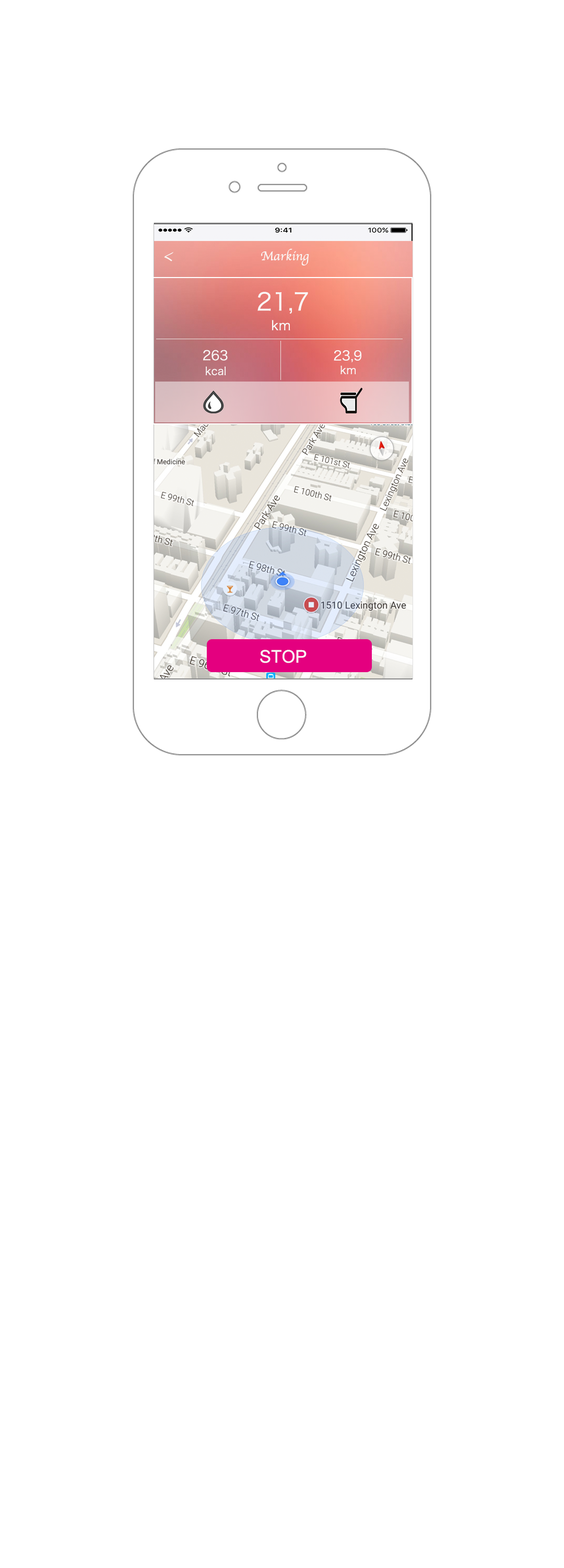
<style>
.page{position:relative;width:564px;height:1568px;background:#ffffff}
.page>*{position:absolute;margin:0}
.t1{font:17.4px "Apple-Chancery";color:#faf6f4}
.t2{font:13.1px "Apple-Chancery";color:#faf6f4}
.t3{font:24px "HiraKakuProN-W3";color:#faf8f7}
.t4{font:13.1px "HiraKakuProN-W3";color:#faf8f7}
.t5{font:10.9px "HiraKakuProN-W3";color:#faf8f7}
.t6{font:17.4px "ArialMT";color:#faf8f7}
</style>
<div class="page">
<p class="t1" style="left:164px;top:252px;width:10px;height:9px">&lt;</p>
<p class="t2" style="left:261px;top:249px;width:48px;height:17px">Marking</p>
<p class="t3" style="left:258px;top:292px;width:50px;height:22px">21,7</p>
<p class="t4" style="left:272px;top:320px;width:19px;height:10px">km</p>
<p class="t4" style="left:203px;top:350px;width:25px;height:11px">263</p>
<p class="t4" style="left:334px;top:350px;width:28px;height:12px">23,9</p>
<p class="t5" style="left:341px;top:365px;width:15px;height:9px">km</p>
<p class="t5" style="left:206px;top:366px;width:20px;height:9px">kcal</p>
<p class="t6" style="left:260px;top:650px;width:47px;height:13px">STOP</p>
</div>
